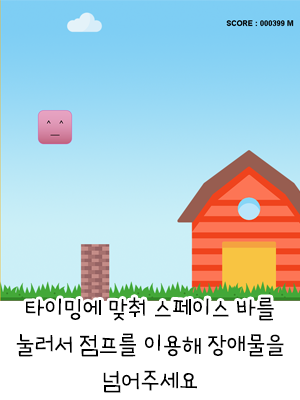
<style>
.page{position:relative;width:300px;height:400px;background:#ffffff}
.page>*{position:absolute;margin:0}
.t1{font:24px/36px "Goyang";color:#000000}
</style>
<div class="page">
<p class="t1" style="left:16px;top:297px;width:268px;height:96px;text-align:center">타이밍에 맞춰 스페이스 바를 눌러서 점프를 이용해 장애물을 넘어주세요</p>
</div>
